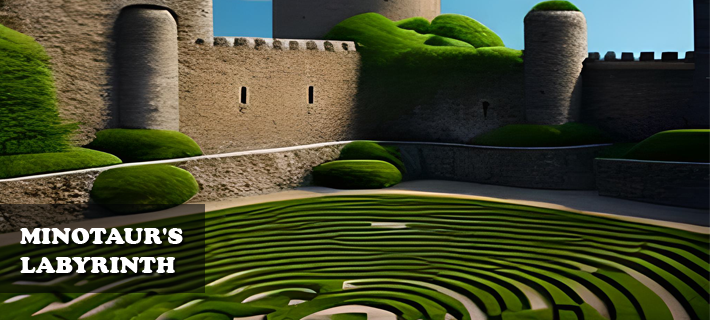
<style>
.page{position:relative;width:710px;height:320px}
.page>*{position:absolute;margin:0}
.t1{font:24px "CooperBlack";color:#ffffff}
</style>
<div class="page">
<p class="t1" style="left:20px;top:228px;width:163px;height:45px">MINOTAUR'S <br>LABYRINTH</p>
</div>
